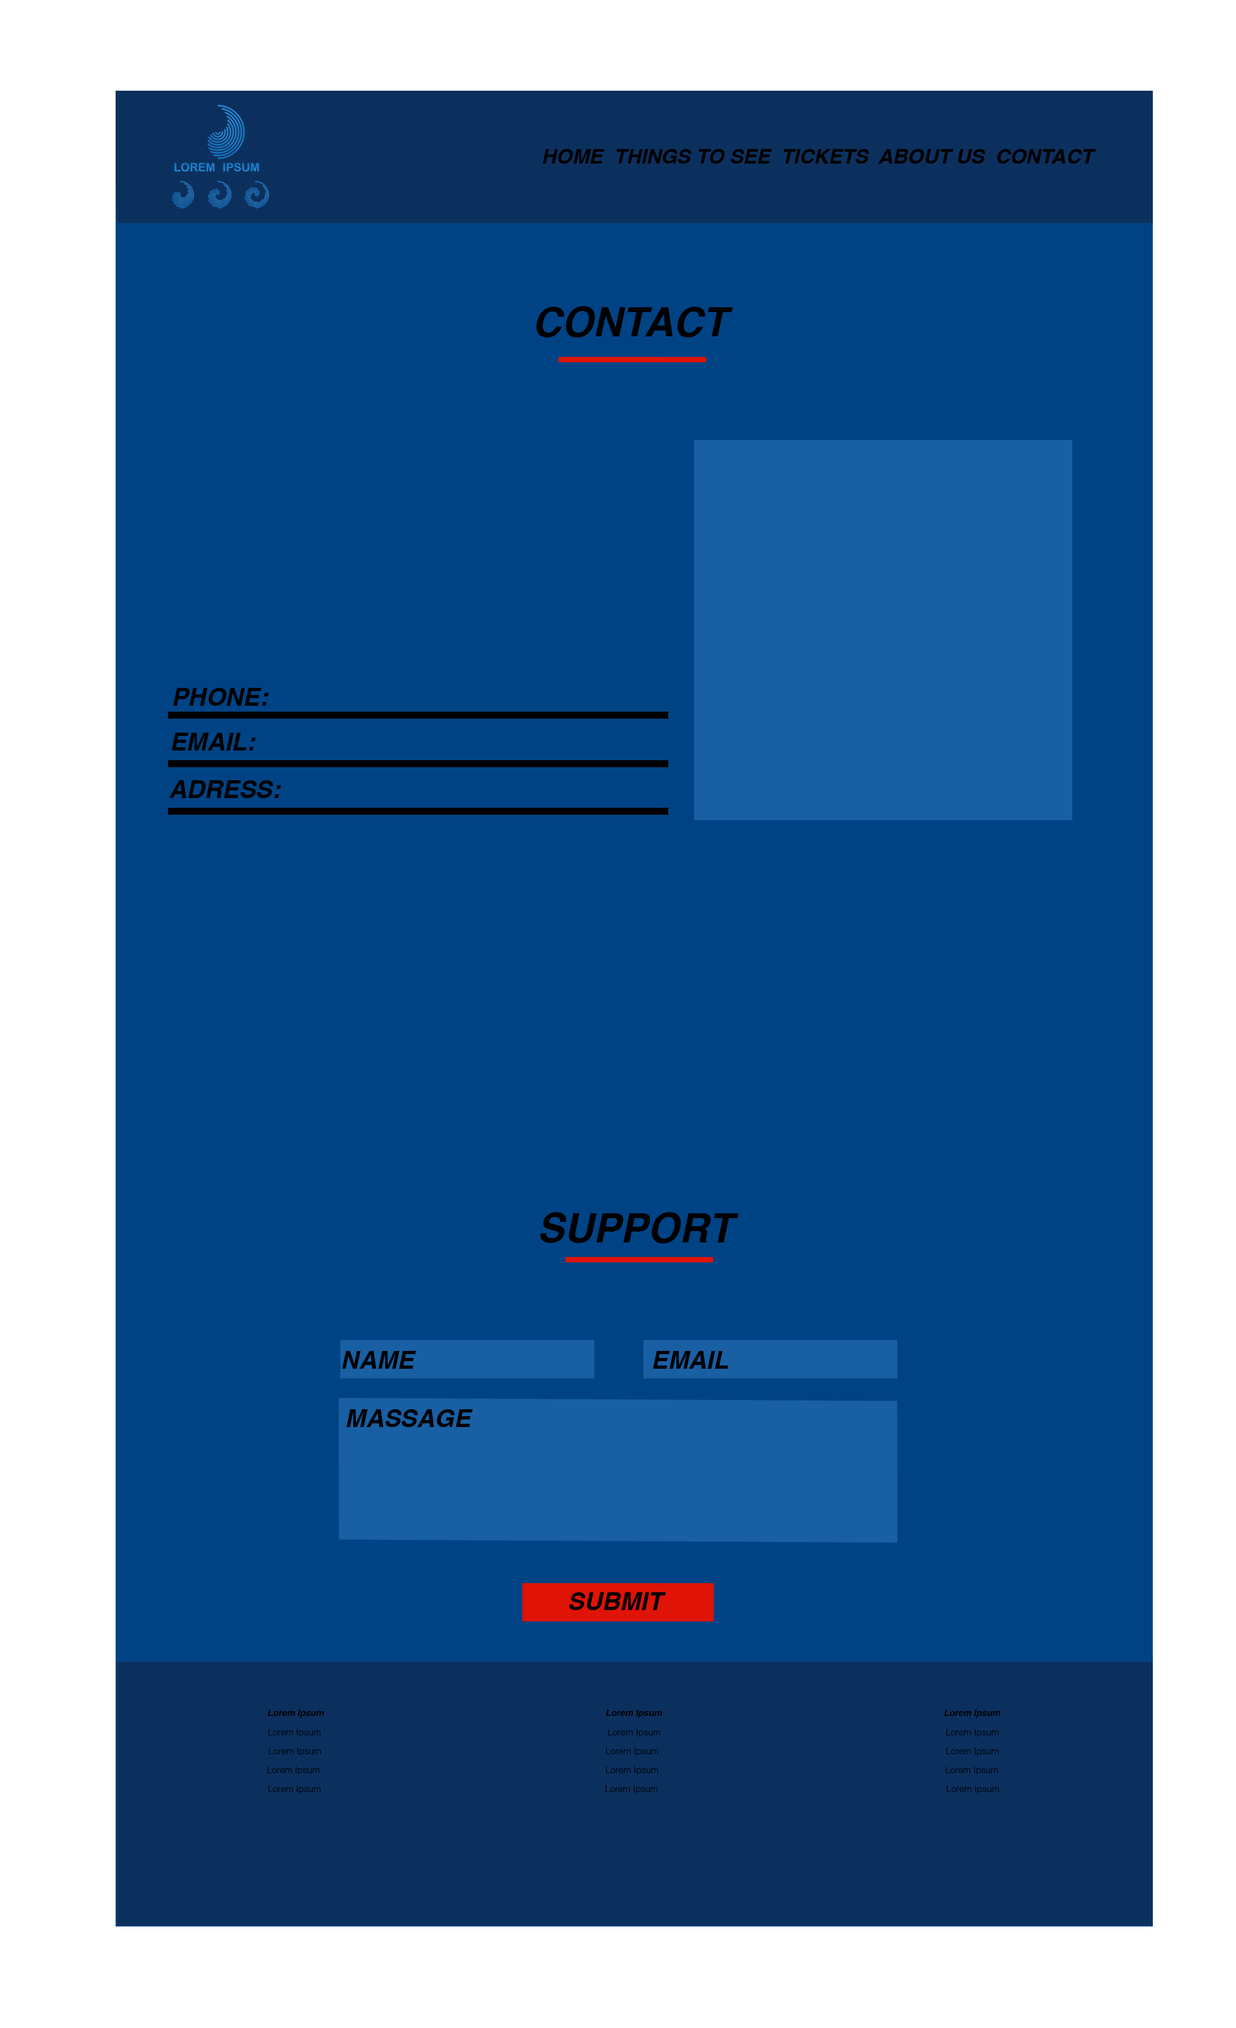
<style>
.page{position:relative;width:1236px;height:2028px;background:#004385}
.page>*{position:absolute;margin:0}
.t1{font:20.2px "Helvetica-BoldOblique";color:#000000}
.t2{font:40.5px "Helvetica-BoldOblique";color:#000000}
.t3{font:24.7px "Helvetica-BoldOblique";color:#000000}
.t4{font:9px "Helvetica-BoldOblique";color:#000000}
.t5{font:9px "Helvetica-Light";color:#000000}
</style>
<div class="page">
<p class="t1" style="left:542px;top:149px;width:554px;height:15px">HOME  THINGS TO SEE  TICKETS  ABOUT US  CONTACT</p>
<p class="t2" style="left:536px;top:306px;width:197px;height:31px">CONTACT</p>
<p class="t3" style="left:173px;top:688px;width:95px;height:18px">PHONE:</p>
<p class="t3" style="left:171px;top:733px;width:84px;height:18px">EMAIL:</p>
<p class="t3" style="left:169px;top:780px;width:112px;height:18px">ADRESS:</p>
<p class="t2" style="left:540px;top:1212px;width:199px;height:32px">SUPPORT</p>
<p class="t3" style="left:342px;top:1351px;width:74px;height:18px">NAME</p>
<p class="t3" style="left:652px;top:1351px;width:76px;height:18px">EMAIL</p>
<p class="t3" style="left:346px;top:1409px;width:126px;height:18px">MASSAGE</p>
<p class="t3" style="left:569px;top:1592px;width:97px;height:18px">SUBMIT</p>
<p class="t4" style="left:267px;top:1710px;width:57px;height:8px">Lorem Ipsum</p>
<p class="t4" style="left:605px;top:1710px;width:57px;height:8px">Lorem Ipsum</p>
<p class="t4" style="left:943px;top:1710px;width:57px;height:8px">Lorem Ipsum</p>
<p class="t5" style="left:268px;top:1729px;width:53px;height:8px">Lorem Ipsum</p>
<p class="t5" style="left:608px;top:1729px;width:52px;height:8px">Lorem Ipsum</p>
<p class="t5" style="left:946px;top:1729px;width:52px;height:8px">Lorem Ipsum</p>
<p class="t5" style="left:269px;top:1748px;width:52px;height:8px">Lorem Ipsum</p>
<p class="t5" style="left:606px;top:1748px;width:52px;height:8px">Lorem Ipsum</p>
<p class="t5" style="left:946px;top:1748px;width:52px;height:8px">Lorem Ipsum</p>
<p class="t5" style="left:267px;top:1767px;width:53px;height:8px">Lorem Ipsum</p>
<p class="t5" style="left:606px;top:1767px;width:52px;height:8px">Lorem Ipsum</p>
<p class="t5" style="left:946px;top:1767px;width:52px;height:8px">Lorem Ipsum</p>
<p class="t5" style="left:268px;top:1786px;width:53px;height:8px">Lorem Ipsum</p>
<p class="t5" style="left:605px;top:1786px;width:53px;height:8px">Lorem Ipsum</p>
<p class="t5" style="left:947px;top:1786px;width:52px;height:8px">Lorem Ipsum</p>
</div>
